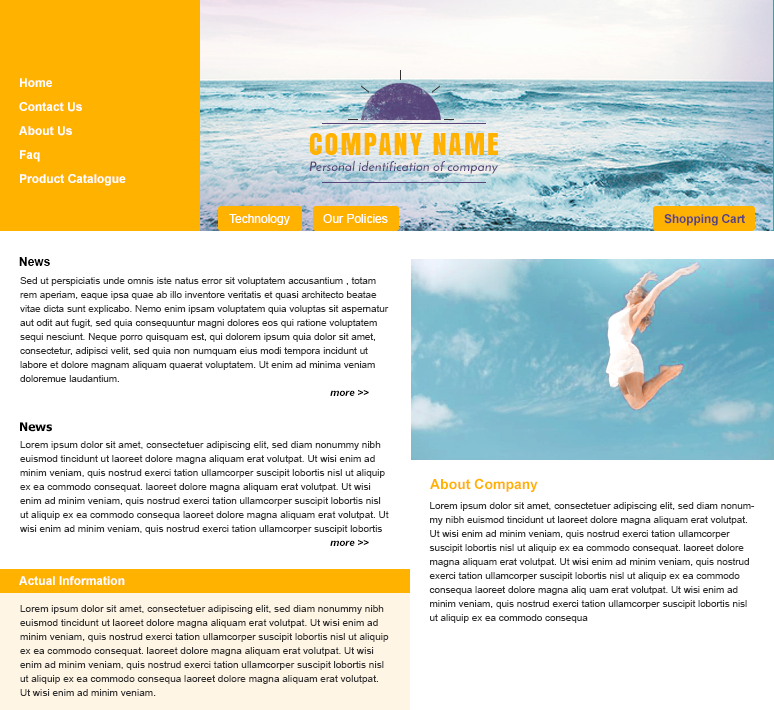
<style>
.page{position:relative;width:774px;height:710px;background:#ffffff}
.page>*{position:absolute;margin:0}
.t1{font:12px "Arial-BoldMT";color:#ffffff}
.t2{font:12px/24px "Arial-BoldMT";color:#ffffff}
.t3{font:28px "Anton";letter-spacing:0.075em;color:#ffb300;text-transform:uppercase}
.t4{font:13px "JosefinSans-SemiBold";letter-spacing:0.022em;color:#574478}
.t5{font:12px "ArialMT";color:#ffffff}
.t6{font:12px "Arial-BoldMT";letter-spacing:-0.01em;color:#574479}
.t7{font:12px "Arial-BoldMT";color:#000000}
.t8{font:10px/14px "ArialMT";color:#333333}
.t9{font:10px "Arial-BoldItalicMT";color:#000000}
.t10{font:12px "Tahoma-Bold";color:#000000}
.t11{font:14px "Arial-BoldMT";color:#ffb300}
</style>
<div class="page">
<p class="t1" style="left:20px;top:78px;width:32px;height:9px">Home</p>
<p class="t2" style="left:19px;top:102px;width:107px;height:84px">Contact Us<br>About Us<br>Faq<br>Product Catalogue</p>
<p class="t3" style="left:309px;top:133px;width:190px;height:22px">Company Name</p>
<p class="t4" style="left:309px;top:160px;width:189px;height:14px">Personal identification of company</p>
<p class="t5" style="left:229px;top:214px;width:159px;height:11px">Technology          Our Policies</p>
<p class="t6" style="left:664px;top:214px;width:81px;height:12px">Shopping Cart</p>
<p class="t7" style="left:19px;top:257px;width:31px;height:9px">News</p>
<p class="t8" style="left:20px;top:277px;width:369px;height:105px">Sed ut perspiciatis unde omnis iste natus error sit voluptatem accusantium , totam rem aperiam, eaque ipsa quae ab illo inventore veritatis et quasi architecto beatae vitae dicta sunt explicabo. Nemo enim ipsam voluptatem quia voluptas sit aspernatur aut odit aut fugit, sed quia consequuntur magni dolores eos qui ratione voluptatem sequi nesciunt. Neque porro quisquam est, qui dolorem ipsum quia dolor sit amet, consectetur, adipisci velit, sed quia non numquam eius modi tempora incidunt ut labore et dolore magnam aliquam quaerat voluptatem. Ut enim ad minima veniam doloremue laudantium.</p>
<p class="t9" style="left:330px;top:389px;width:39px;height:7px">more &gt;&gt;</p>
<p class="t10" style="left:20px;top:422px;width:32px;height:10px">News</p>
<p class="t8" style="left:20px;top:441px;width:369px;height:93px">Lorem ipsum dolor sit amet, consectetuer adipiscing elit, sed diam nonummy nibh euismod tincidunt ut laoreet dolore magna aliquam erat volutpat. Ut wisi enim ad minim veniam, quis nostrud exerci tation ullamcorper suscipit lobortis nisl ut aliquip ex ea commodo consequat. laoreet dolore magna aliquam erat volutpat. Ut wisi enim ad minim veniam, quis nostrud exerci tation ullamcorper suscipit lobortis nisl ut aliquip ex ea commodo consequa laoreet dolore magna aliquam erat volutpat. Ut wisi enim ad minim veniam, quis nostrud exerci tation ullamcorper suscipit lobortis nisl ut aliquip ex ea commodo consequa</p>
<p class="t11" style="left:430px;top:478px;width:108px;height:14px">About Company</p>
<p class="t8" style="left:429px;top:502px;width:326px;height:121px">Lorem ipsum dolor sit amet, consectetuer adipiscing elit, sed diam nonummy nibh euismod tincidunt ut laoreet dolore magna aliquam erat volutpat. Ut wisi enim ad minim veniam, quis nostrud exerci tation ullamcorper suscipit lobortis nisl ut aliquip ex ea commodo consequat. laoreet dolore magna aliquam erat volutpat. Ut wisi enim ad minim veniam, quis nostrud exerci tation ullamcorper suscipit lobortis nisl ut aliquip ex ea commodo consequa laoreet dolore magna aliq uam erat volutpat. Ut wisi enim ad minim veniam, quis nostrud exerci tation ullamcorper suscipit lobortis nisl ut aliquip ex ea commodo consequa</p>
<p class="t9" style="left:330px;top:539px;width:39px;height:7px">more &gt;&gt;</p>
<p class="t1" style="left:19px;top:576px;width:106px;height:9px">Actual Information</p>
<p class="t8" style="left:20px;top:605px;width:369px;height:91px">Lorem ipsum dolor sit amet, consectetuer adipiscing elit, sed diam nonummy nibh euismod tincidunt ut laoreet dolore magna aliquam erat volutpat. Ut wisi enim ad minim veniam, quis nostrud exerci tation ullamcorper suscipit lobortis nisl ut aliquip ex ea commodo consequat. laoreet dolore magna aliquam erat volutpat. Ut wisi enim ad minim veniam, quis nostrud exerci tation ullamcorper suscipit lobortis nisl ut aliquip ex ea commodo consequa laoreet dolore magna aliquam erat volutpat. Ut wisi enim ad minim veniam.</p>
</div>
